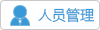
<style>
.page{position:relative;width:100px;height:30px;background:#ffffff}
.page>*{position:absolute;margin:0}
.t1{font:14px "MicrosoftYaHei";color:#3998d6}
</style>
<div class="page">
<p class="t1" style="left:38px;top:8px;width:57px;height:15px">人员管理</p>
</div>
